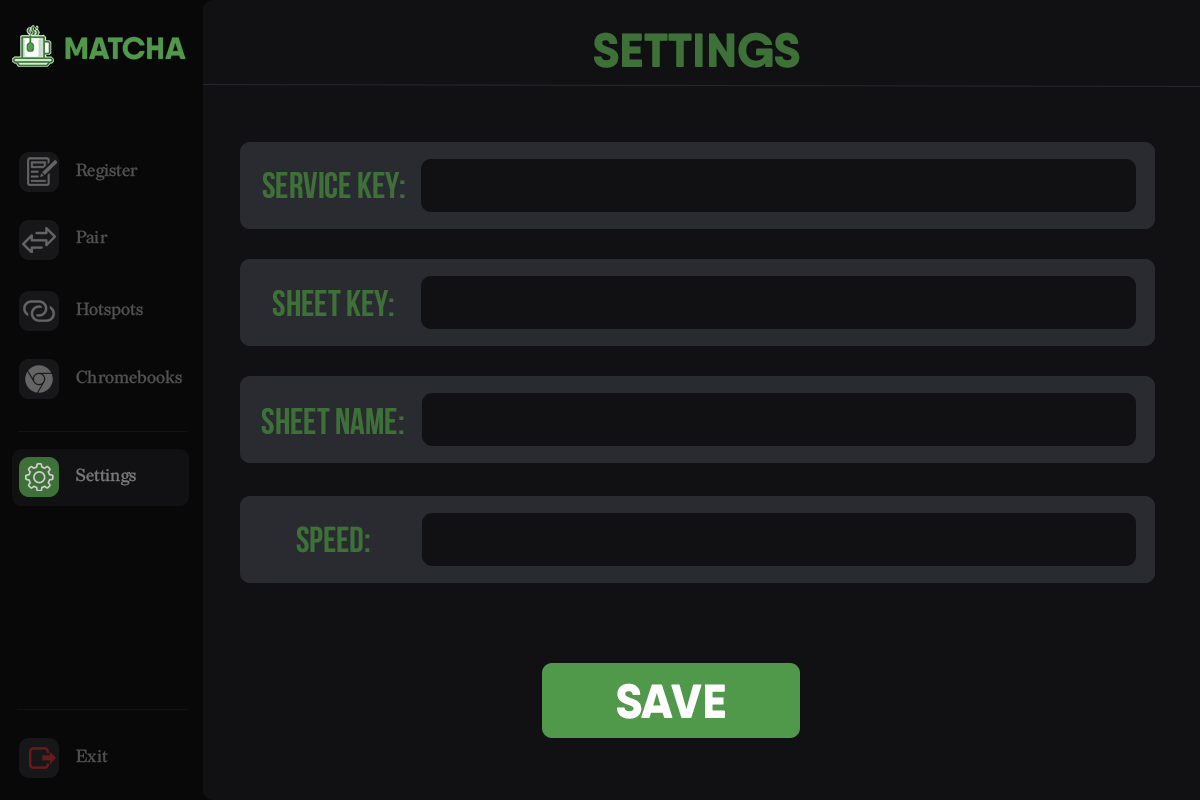
<style>
.page{position:relative;width:1200px;height:800px;background:#111113}
.page>*{position:absolute;margin:0}
.t1{font:48px "QanelasSoftDEMO-ExtraBold";color:#3d7138}
.t2{font:17.4px "Redaction-Regular";color:#505050}
.t3{font:36px "BebasNeue-Bold";color:#3d7138}
.t4{font:17.4px "Redaction-Regular";color:#787878}
.t5{font:48px "QanelasSoftDEMO-ExtraBold";color:#ffffff}
</style>
<div class="page">
<p class="t1" style="left:594px;top:32px;width:206px;height:36px">SETTINGS</p>
<p class="t2" style="left:76px;top:163px;width:62px;height:18px">Register</p>
<p class="t3" style="left:262px;top:172px;width:143px;height:26px">Service Key:</p>
<p class="t2" style="left:76px;top:230px;width:32px;height:14px">Pair</p>
<p class="t3" style="left:272px;top:290px;width:122px;height:26px">Sheet Key:</p>
<p class="t2" style="left:76px;top:302px;width:67px;height:18px">Hotspots</p>
<p class="t2" style="left:76px;top:370px;width:106px;height:14px">Chromebooks</p>
<p class="t3" style="left:261px;top:408px;width:143px;height:26px">SHEET NAME:</p>
<p class="t4" style="left:76px;top:468px;width:60px;height:18px">Settings</p>
<p class="t3" style="left:296px;top:526px;width:74px;height:27px">SPEED:</p>
<p class="t5" style="left:617px;top:683px;width:108px;height:36px">SAVE</p>
<p class="t2" style="left:76px;top:749px;width:32px;height:14px">Exit</p>
</div>
